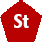
<style>
.page{position:relative;width:42px;height:42px;background:#ba0101}
.page>*{position:absolute;margin:0}
.t1{font:20px "AbadiMT-CondensedExtraBold";color:#ffffff}
</style>
<div class="page">
<p class="t1" style="left:14px;top:14px;width:15px;height:14px">St</p>
</div>
